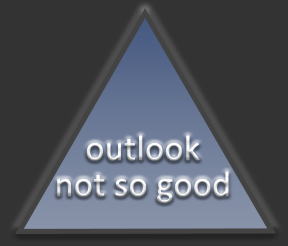
<style>
.page{position:relative;width:288px;height:246px;background:#333333}
.page>*{position:absolute;margin:0}
.t1{font:36px/36px "Calibri";letter-spacing:0.01em}
.t2{font:36px/14px "Calibri";letter-spacing:0.01em}
</style>
<div class="page">
<p class="t1" style="left:57px;top:135px;width:172px;height:68px"><span class="t2"><br><br><br></span><br><br>outlook not so good</p>
</div>
